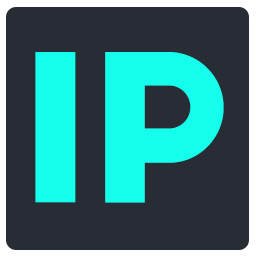
<style>
.page{position:relative;width:256px;height:256px;background:#282c34}
.page>*{position:absolute;margin:0}
.t1{font:200px "BigJohn";color:#14ffec}
</style>
<div class="page">
<p class="t1" style="left:35px;top:52px;width:189px;height:151px">ip</p>
</div>
